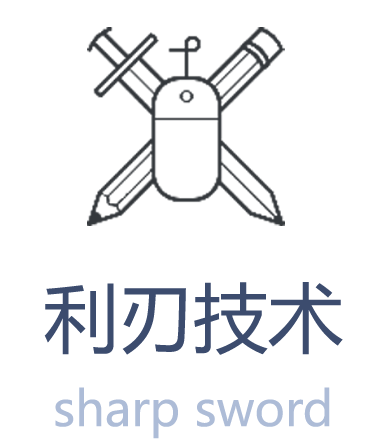
<style>
.page{position:relative;width:371px;height:439px;background:#ffffff}
.page>*{position:absolute;margin:0}
.t1{font:74.7px "MicrosoftYaHei";color:#3c4c6e}
.t2{font:48px "MicrosoftYaHei";color:#adbcd7}
</style>
<div class="page">
<p class="t1" style="left:44px;top:282px;width:299px;height:73px">利刃技术</p>
<p class="t2" style="left:55px;top:387px;width:275px;height:52px">sharp sword</p>
</div>
